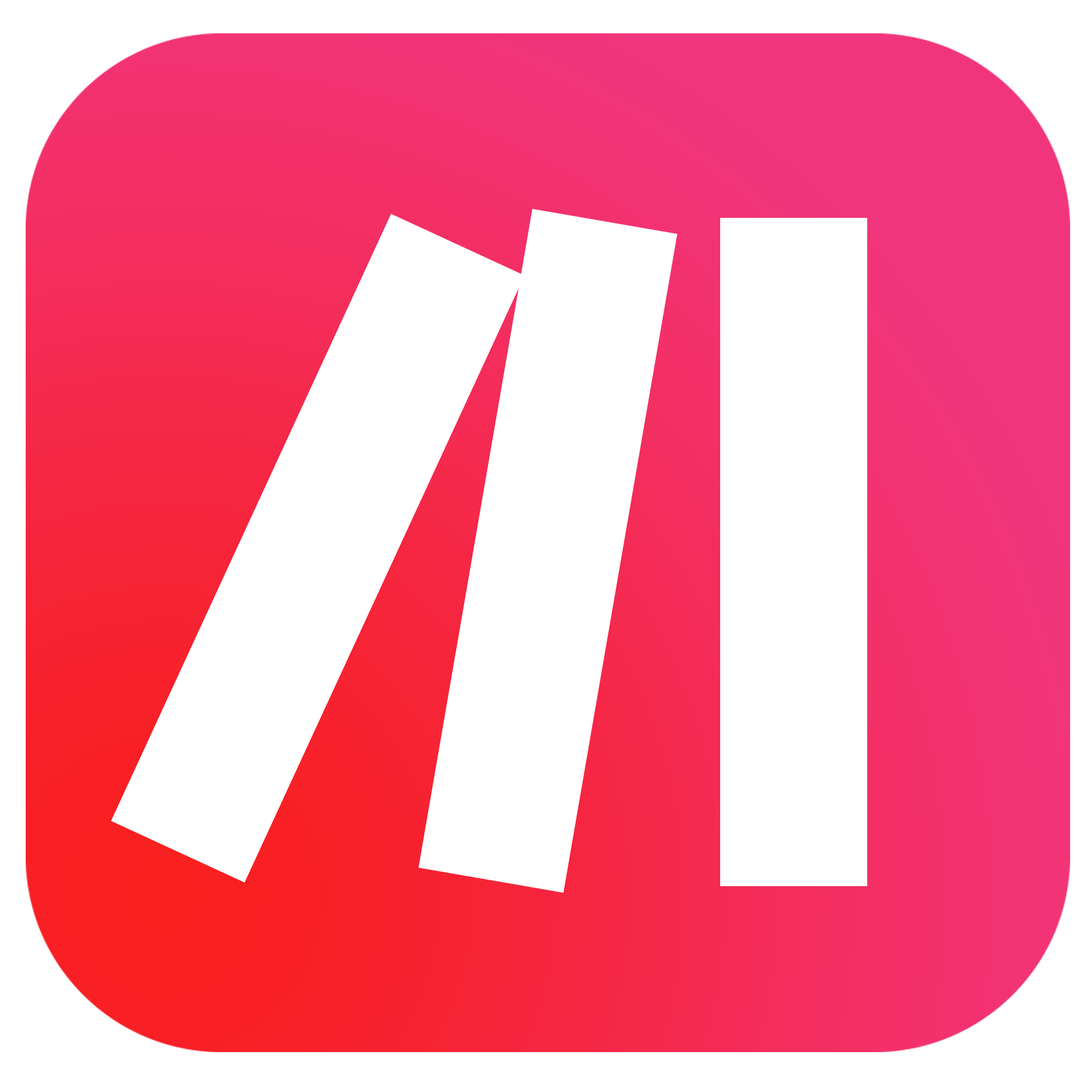
<style>
.page{position:relative;width:1092px;height:1092px;background:#ffffff}
.page>*{position:absolute;margin:0}
.t1{font:936.3px "Couture-Bold";color:#ffffff}
</style>
<div class="page">
<p class="t1" style="left:418px;top:209px;width:260px;height:684px;rotate:10deg">I</p>
<p class="t1" style="left:111px;top:213px;width:414px;height:670px;rotate:25deg">I</p>
<p class="t1" style="left:720px;top:218px;width:148px;height:668px">I</p>
</div>
